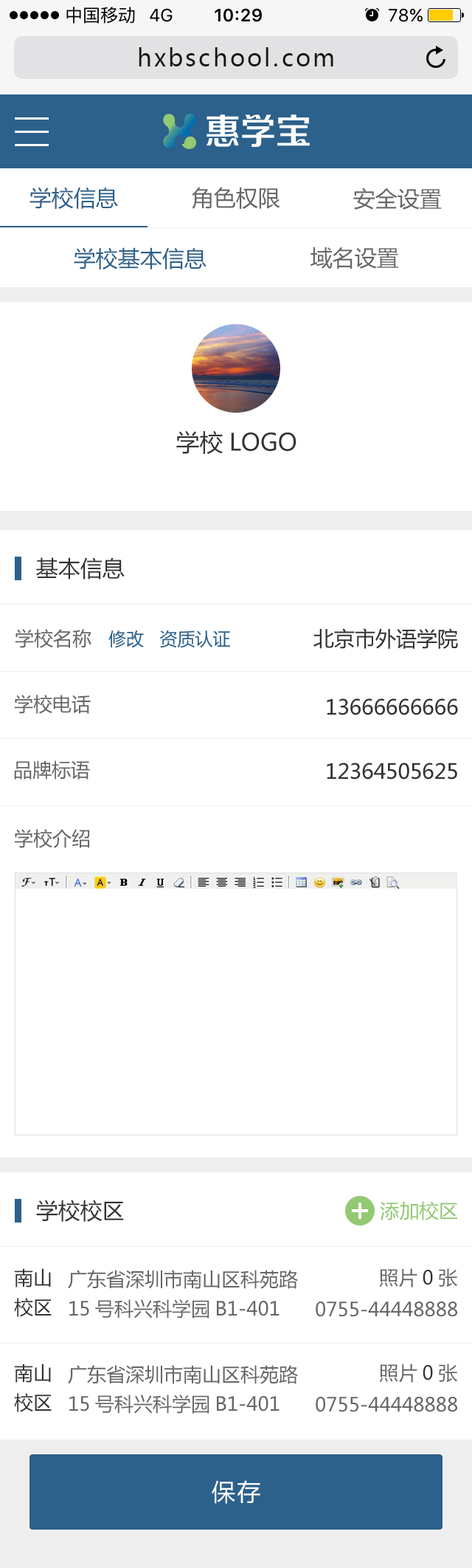
<style>
.page{position:relative;width:472px;height:1568px;background:#ffffff}
.page>*{position:absolute;margin:0}
.t1{font:23.6px "MicrosoftYaHei";letter-spacing:0.1em;color:#171717}
.t2{font:22.1px "MicrosoftYaHei";color:#2c618b}
.t3{font:22.1px "MicrosoftYaHei";color:#666666}
.t4{font:23.6px "MicrosoftYaHei";color:#333333}
.t5{font:22.1px "MicrosoftYaHei";color:#333333}
.t6{font:17.7px "MicrosoftYaHei";color:#2c618b}
.t7{font:19.2px "MicrosoftYaHei";color:#666666}
.t8{font:20.7px "MicrosoftYaHei";color:#333333}
.t9{font:19.2px "MicrosoftYaHei";color:#93c971}
.t10{font:19.2px/29.5px "MicrosoftYaHei";color:#333333}
.t11{font:19.2px/29.5px "MicrosoftYaHei";color:#666666}
.t12{font:19.2px "MicrosoftYaHei";color:#333333}
.t13{font:23.6px "MicrosoftYaHei";letter-spacing:0.075em;color:#ffffff}
</style>
<div class="page">
<p class="t1" style="left:139px;top:47px;width:195px;height:19px">hxbschool.com</p>
<p class="t2" style="left:30px;top:187px;width:88px;height:22px">学校信息</p>
<p class="t3" style="left:192px;top:187px;width:89px;height:22px">角色权限</p>
<p class="t3" style="left:354px;top:188px;width:88px;height:22px">安全设置</p>
<p class="t2" style="left:74px;top:247px;width:133px;height:22px">学校基本信息</p>
<p class="t3" style="left:311px;top:247px;width:88px;height:22px">域名设置</p>
<p class="t4" style="left:176px;top:430px;width:121px;height:24px">学校LOGO</p>
<p class="t5" style="left:36px;top:557px;width:89px;height:23px">基本信息</p>
<p class="t6" style="left:15px;top:629px;width:215px;height:19px"><span class="t7">学校名称   </span>修改   资质认证</p>
<p class="t8" style="left:314px;top:628px;width:144px;height:21px">北京市外语学院</p>
<p class="t7" style="left:14px;top:695px;width:77px;height:19px">学校电话</p>
<p class="t8" style="left:327px;top:698px;width:131px;height:17px">13666666666</p>
<p class="t7" style="left:14px;top:760px;width:76px;height:20px">品牌标语</p>
<p class="t8" style="left:327px;top:763px;width:131px;height:17px">12364505625</p>
<p class="t7" style="left:14px;top:829px;width:76px;height:19px">学校介绍</p>
<p class="t5" style="left:36px;top:1200px;width:88px;height:22px">学校校区</p>
<p class="t9" style="left:380px;top:1201px;width:78px;height:19px">添加校区</p>
<p class="t10" style="left:14px;top:1268px;width:38px;height:49px">南山<br>校区</p>
<p class="t11" style="left:68px;top:1270px;width:230px;height:48px">广东省深圳市南山区科苑路<br>15号科兴科学园B1-401</p>
<p class="t7" style="left:379px;top:1268px;width:79px;height:19px">照片<span class="t12">0</span>张</p>
<p class="t7" style="left:316px;top:1301px;width:142px;height:16px">0755-44448888</p>
<p class="t10" style="left:14px;top:1364px;width:38px;height:48px">南山<br>校区</p>
<p class="t11" style="left:68px;top:1365px;width:230px;height:49px">广东省深圳市南山区科苑路<br>15号科兴科学园B1-401</p>
<p class="t7" style="left:379px;top:1364px;width:79px;height:19px">照片<span class="t12">0</span>张</p>
<p class="t7" style="left:316px;top:1397px;width:142px;height:15px">0755-44448888</p>
<p class="t13" style="left:212px;top:1480px;width:49px;height:24px">保存</p>
</div>
